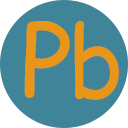
<style>
.page{position:relative;width:128px;height:128px;background:#408499}
.page>*{position:absolute;margin:0}
.t1{font:98.2px "ComicSansMS";letter-spacing:0.07em;color:#e8961a;font-weight:bold}
.t2{font:99.3px "ComicSansMS";letter-spacing:0.07em;color:#e8961a;font-weight:bold;scale:0.92 1}
</style>
<div class="page">
<p class="t1" style="left:24px;top:21px;width:46px;height:77px">P</p>
<p class="t2" style="left:74px;top:21px;width:45px;height:79px">b</p>
</div>
